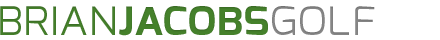
<style>
.page{position:relative;width:440px;height:40px;background:#ffffff}
.page>*{position:absolute;margin:0}
.t1{font:50px "Exo-DemiBold";color:#45812b;font-variant:small-caps}
.t2{font:50px "Exo-Light";color:#45812b;font-variant:small-caps}
.t3{font:50px "Exo-Light";color:#888888;font-variant:small-caps}
</style>
<div class="page">
<p class="t1" style="left:0px;top:6px;width:375px;height:30px"><span class="t2">brian</span>jacobs<span class="t3">golf</span></p>
</div>
